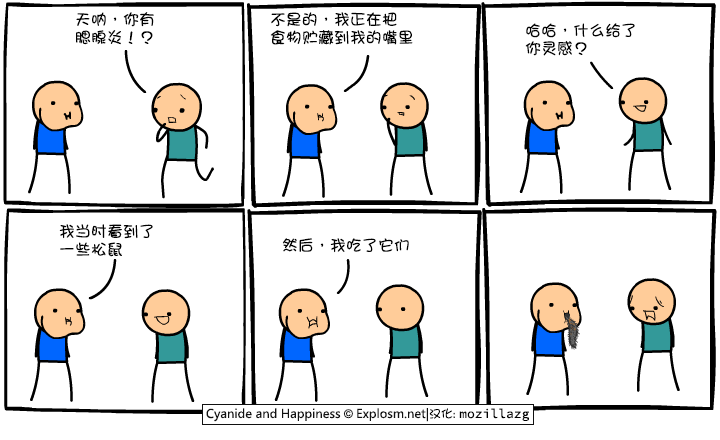
<style>
.page{position:relative;width:720px;height:440px;background:#ffffff}
.page>*{position:absolute;margin:0}
.t1{font:16px/18px "DFGirl";color:#000000}
.t2{font:16px "DFGirl";color:#000000}
</style>
<div class="page">
<p class="t1" style="left:76px;top:12px;width:78px;height:33px">天呐，你有<br>腮腺炎！？</p>
<p class="t1" style="left:270px;top:12px;width:143px;height:33px">不是的，我正在把<br>食物贮藏到我的嘴里</p>
<p class="t1" style="left:525px;top:23px;width:110px;height:33px">哈哈，什么给了<br>你灵感？</p>
<p class="t1" style="left:59px;top:224px;width:94px;height:33px">我当时看到了<br>一些松鼠</p>
<p class="t2" style="left:282px;top:238px;width:127px;height:15px">然后，我吃了它们</p>
</div>
